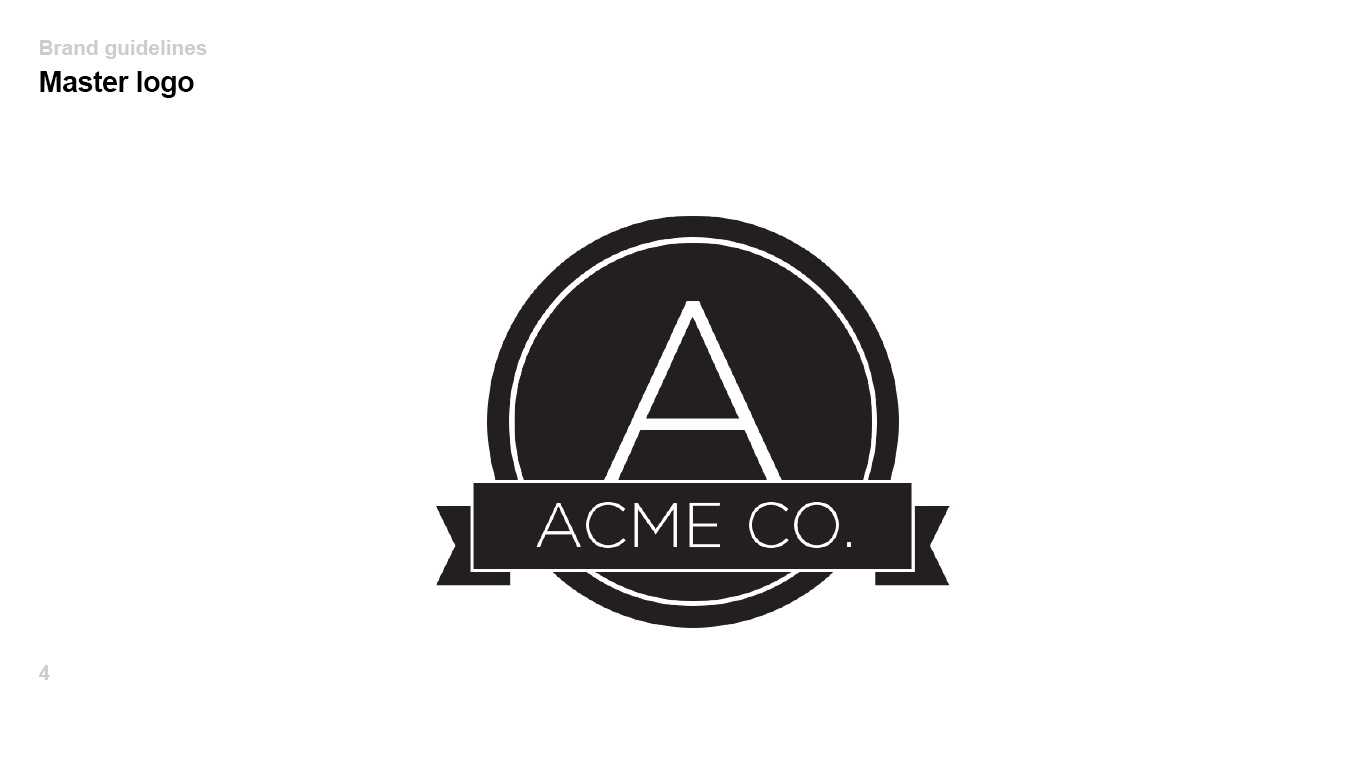
<style>
.page{position:relative;width:1366px;height:768px;background:#ffffff}
.page>*{position:absolute;margin:0}
.t1{font:20.8px "Arial-BoldMT";color:#cccccc}
.t2{font:29.2px "Arial-BoldMT";letter-spacing:-0.025em;color:#000000}
</style>
<div class="page">
<p class="t1" style="left:40px;top:40px;width:167px;height:19px">Brand guidelines</p>
<p class="t2" style="left:40px;top:71px;width:154px;height:27px">Master logo</p>
<p class="t1" style="left:39px;top:665px;width:11px;height:15px">4</p>
</div>
